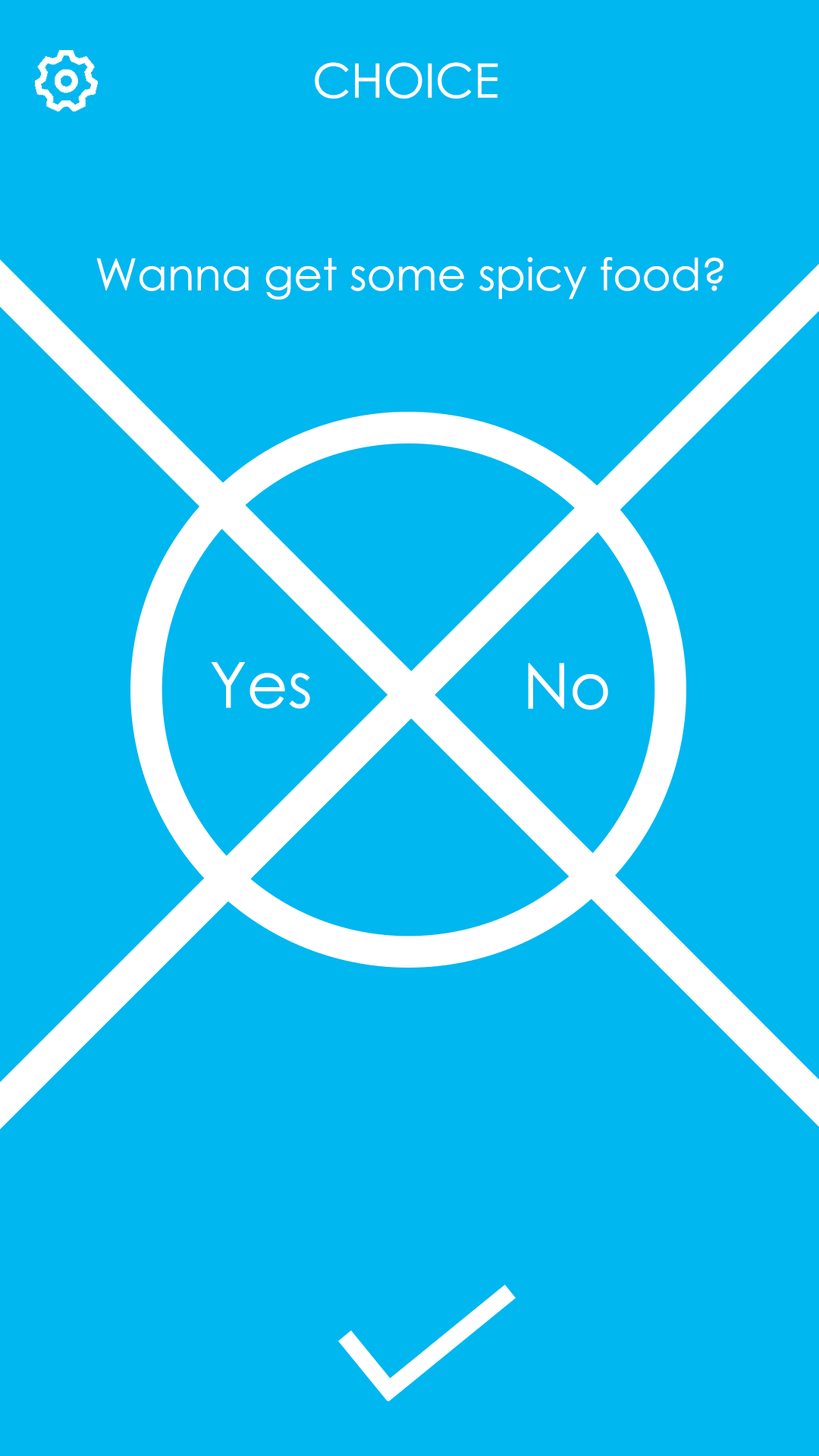
<style>
.page{position:relative;width:819px;height:1456px;background:#00b7ef}
.page>*{position:absolute;margin:0}
.t1{font:47.4px "CenturyGothic";color:#ffffff}
.t2{font:44.2px "CenturyGothic";color:#ffffff}
.t3{font:63.2px "CenturyGothic";color:#ffffff}
</style>
<div class="page">
<p class="t1" style="left:315px;top:62px;width:183px;height:37px">CHOICE</p>
<p class="t2" style="left:96px;top:257px;width:627px;height:43px">Wanna get some spicy food?</p>
<p class="t3" style="left:211px;top:662px;width:99px;height:47px">Yes</p>
<p class="t3" style="left:528px;top:663px;width:80px;height:47px">No</p>
</div>
